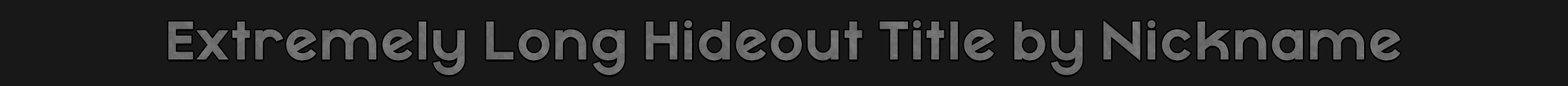
<style>
.page{position:relative;width:1568px;height:86px;background:#181818}
.page>*{position:absolute;margin:0}
.t1{font:53.5px "MayekaBold";color:#6c6c6c}
</style>
<div class="page">
<p class="t1" style="left:168px;top:20px;width:1233px;height:55px">Extremely Long Hideout Title by Nickname</p>
</div>
